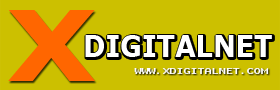
<style>
.page{position:relative;width:280px;height:90px;background:#ccc000}
.page>*{position:absolute;margin:0}
.t1{font:97.3px "Verdana-Bold";color:#ff6600;scale:1.2 1}
.t2{font:30px "Verdana-Bold";color:#ffffff;scale:0.9 1}
.t3{font:9px "WST_Czec";color:#ffffff}
</style>
<div class="page">
<p class="t1" style="left:8px;top:10px;width:87px;height:71px">X</p>
<p class="t2" style="left:85px;top:35px;width:187px;height:22px">DIGITALNET</p>
<p class="t3" style="left:134px;top:68px;width:135px;height:6px">WWW.XDIGITALNET.COM</p>
</div>
